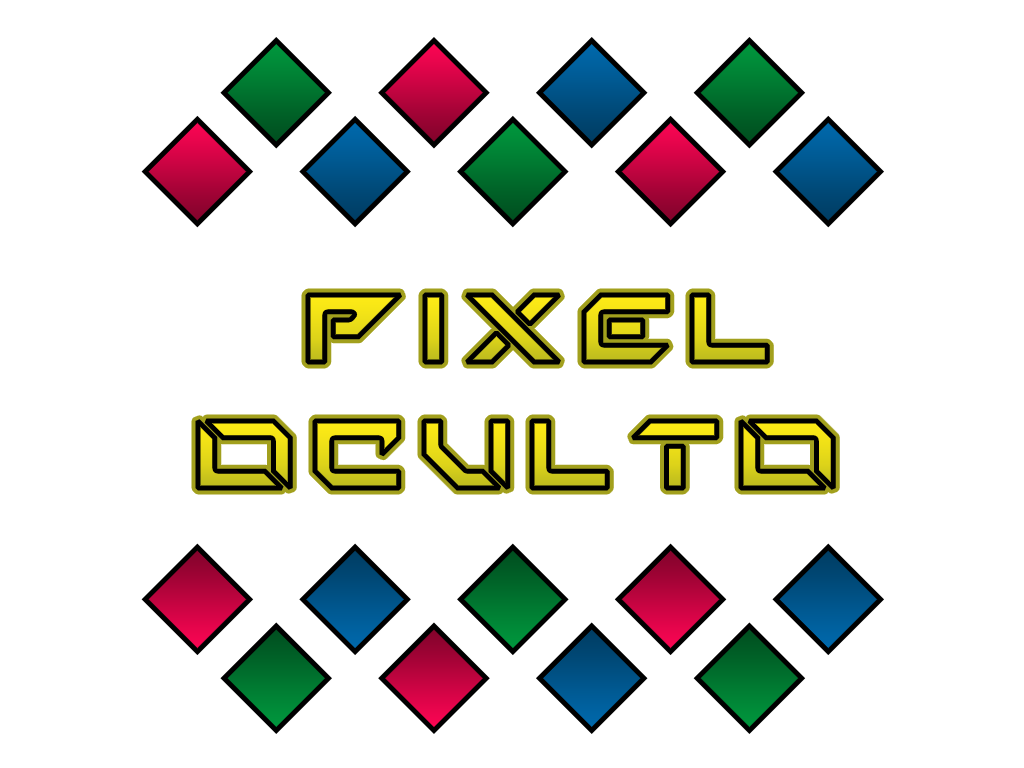
<style>
.page{position:relative;width:1024px;height:768px;background:#ffffff}
.page>*{position:absolute;margin:0}
.t1{font:134.1px "TechnoHideo";letter-spacing:0.1em;font-weight:bold}
</style>
<div class="page">
<p class="t1" style="left:305px;top:292px;width:465px;height:73px">Pixel</p>
<p class="t1" style="left:195px;top:418px;width:641px;height:73px">oculto</p>
</div>
